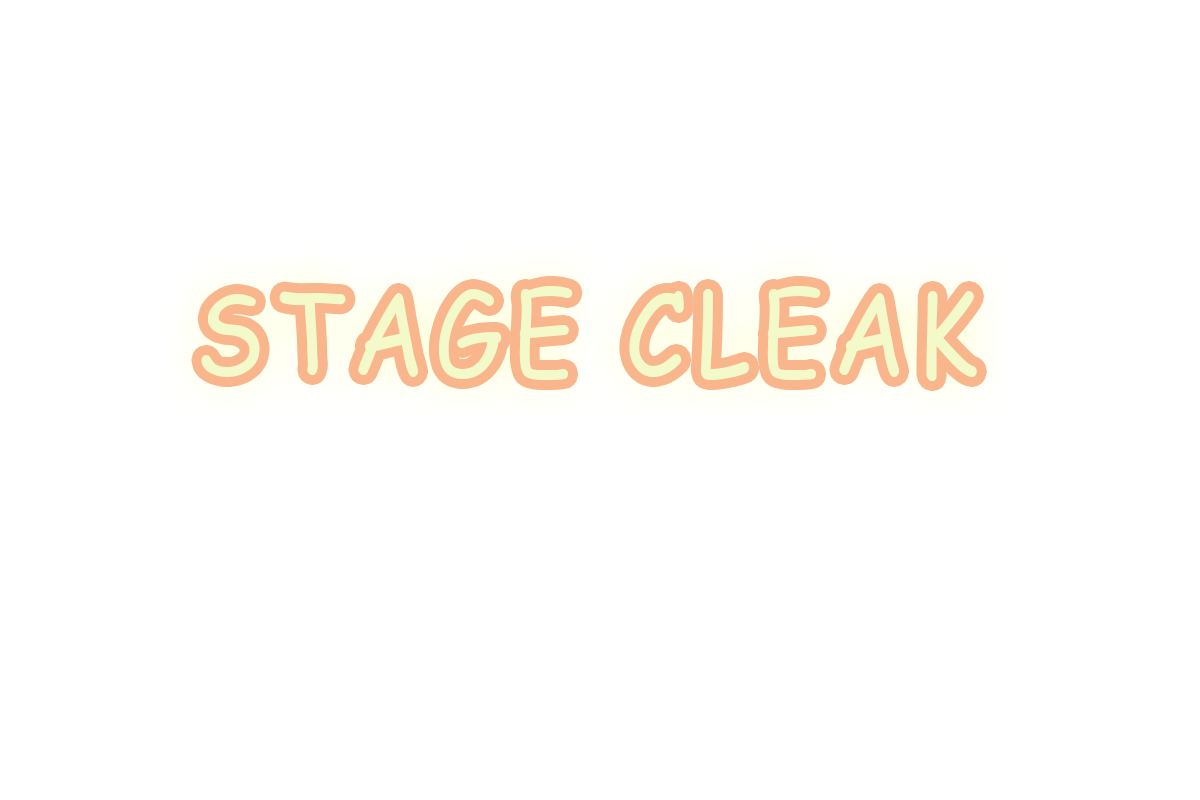
<style>
.page{position:relative;width:1200px;height:800px;background:#ffffff}
.page>*{position:absolute;margin:0}
.t1{font:113.3px "ComicSansMS";letter-spacing:0.1em;color:#f3f9c8;scale:0.88 1}
</style>
<div class="page">
<p class="t1" style="left:201px;top:286px;width:776px;height:95px">STAGE CLEAK</p>
</div>
